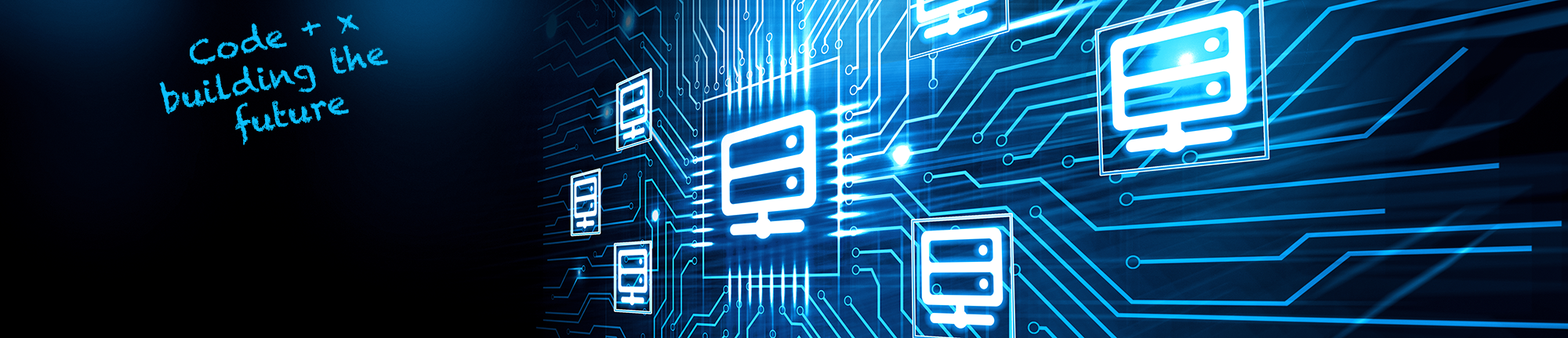
<style>
.page{position:relative;width:1568px;height:338px}
.page>*{position:absolute;margin:0}
.t1{font:32.8px "Chalkduster";color:#0bc1ff}
</style>
<div class="page">
<p class="t1" style="left:159px;top:14px;width:229px;height:131px;text-align:center;rotate:-13deg">Code + x<br>building the <br>future</p>
</div>
